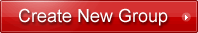
<style>
.page{position:relative;width:198px;height:33px}
.page>*{position:absolute;margin:0}
.t1{font:18px "ArialMT";color:#ffffff}
</style>
<div class="page">
<p class="t1" style="left:19px;top:8px;width:149px;height:18px">Create New Group</p>
</div>
